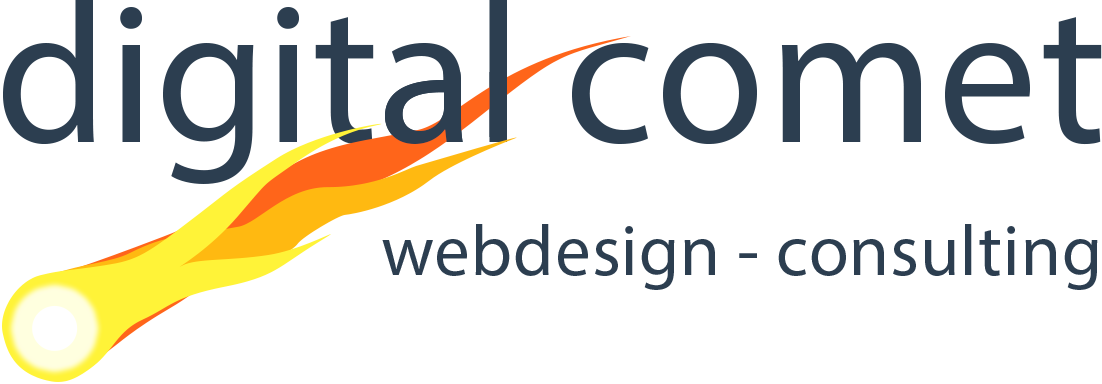
<style>
.page{position:relative;width:1102px;height:384px;background:#ffffff}
.page>*{position:absolute;margin:0}
.t1{font:200px "MyriadPro-Regular";color:#fefffe}
.t2{font:200px "MyriadPro-Regular";letter-spacing:0.013em;color:#fefffe}
.t3{font:72px "MyriadPro-Regular";letter-spacing:0.013em;color:#fefffe}
</style>
<div class="page">
<p class="t1" style="left:3px;top:0px;width:1099px;height:184px">digital <span class="t2">comet</span></p>
<p class="t1" style="left:3px;top:0px;width:1099px;height:184px">digital <span class="t2">comet</span></p>
<p class="t3" style="left:382px;top:224px;width:716px;height:66px">webdesign - consulting</p>
</div>
